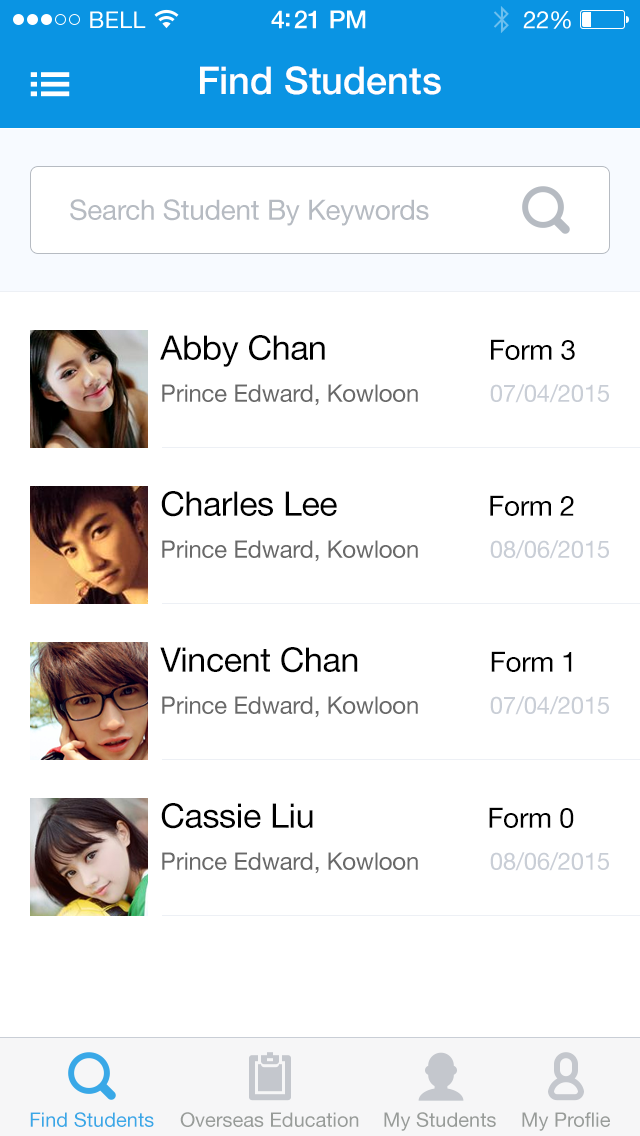
<style>
.page{position:relative;width:640px;height:1136px;background:#ffffff}
.page>*{position:absolute;margin:0}
.t1{font:38px "HelveticaNeueLTPro-Md";color:#ffffff}
.t2{font:28px "HelveticaNeue";letter-spacing:-0.01em;color:#b6bbc2}
.t3{font:24px/42px "HelveticaNeue";letter-spacing:-0.01em;color:#696969}
.t4{font:34px/42px "HelveticaNeue";letter-spacing:-0.01em;color:#000000}
.t5{font:28px/42px "HelveticaNeue";letter-spacing:-0.01em;color:#000000}
.t6{font:24px/42px "HelveticaNeue";letter-spacing:-0.01em;color:#c9ced6}
.t7{font:20px "HelveticaNeue";color:#39a8e7}
.t8{font:20px "HelveticaNeue";color:#989c99}
</style>
<div class="page">
<p class="t1" style="left:200px;top:66px;width:241px;height:29px">Find Students</p>
<p class="t2" style="left:70px;top:199px;width:359px;height:27px">Search Student By Keywords</p>
<p class="t3" style="left:160px;top:335px;width:449px;height:71px"><span class="t4">Abby Chan                  </span><span class="t5">Form 3<br></span>Prince Edward, Kowloon           <span class="t6">07/04/2015</span></p>
<p class="t3" style="left:161px;top:491px;width:448px;height:71px"><span class="t4">Charles Lee                 </span><span class="t5">Form 2<br></span>Prince Edward, Kowloon           <span class="t6">08/06/2015</span></p>
<p class="t3" style="left:160px;top:647px;width:449px;height:71px"><span class="t4">Vincent Chan               </span><span class="t5">Form 1<br></span>Prince Edward, Kowloon           <span class="t6">07/04/2015</span></p>
<p class="t3" style="left:161px;top:803px;width:448px;height:71px"><span class="t4">Cassie Liu                          </span><span class="t5">Form 0<br></span>Prince Edward, Kowloon           <span class="t6">08/06/2015</span></p>
<p class="t7" style="left:30px;top:1112px;width:124px;height:15px">Find Students</p>
<p class="t8" style="left:180px;top:1112px;width:179px;height:15px">Overseas Education</p>
<p class="t8" style="left:384px;top:1112px;width:112px;height:19px">My Students</p>
<p class="t8" style="left:522px;top:1112px;width:88px;height:19px">My Proflie</p>
</div>
